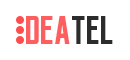
<style>
.page{position:relative;width:130px;height:60px;background:#ffffff}
.page>*{position:absolute;margin:0}
.t1{font:40px "ReckonerBold"}
</style>
<div class="page">
<p class="t1" style="left:26px;top:16px;width:87px;height:28px">DEATEL</p>
</div>
